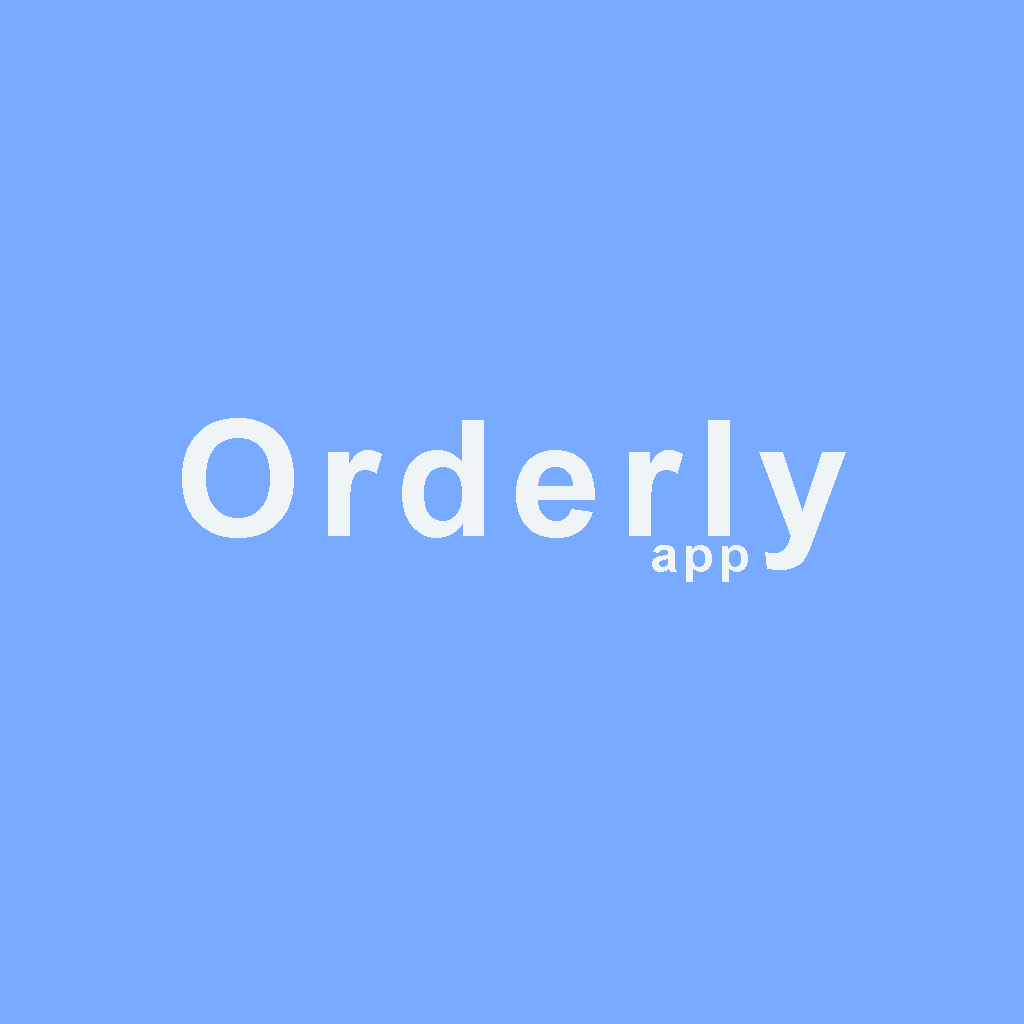
<style>
.page{position:relative;width:1024px;height:1024px;background:#78abff}
.page>*{position:absolute;margin:0}
.t1{font:162px "Arial-BoldMT";letter-spacing:0.1em;color:#eff4f7}
.t2{font:50px "Arial-BoldMT";letter-spacing:0.1em;color:#eff4f7}
</style>
<div class="page">
<p class="t1" style="left:182px;top:418px;width:664px;height:152px">Orderly</p>
<p class="t2" style="left:652px;top:545px;width:96px;height:37px">app</p>
</div>
